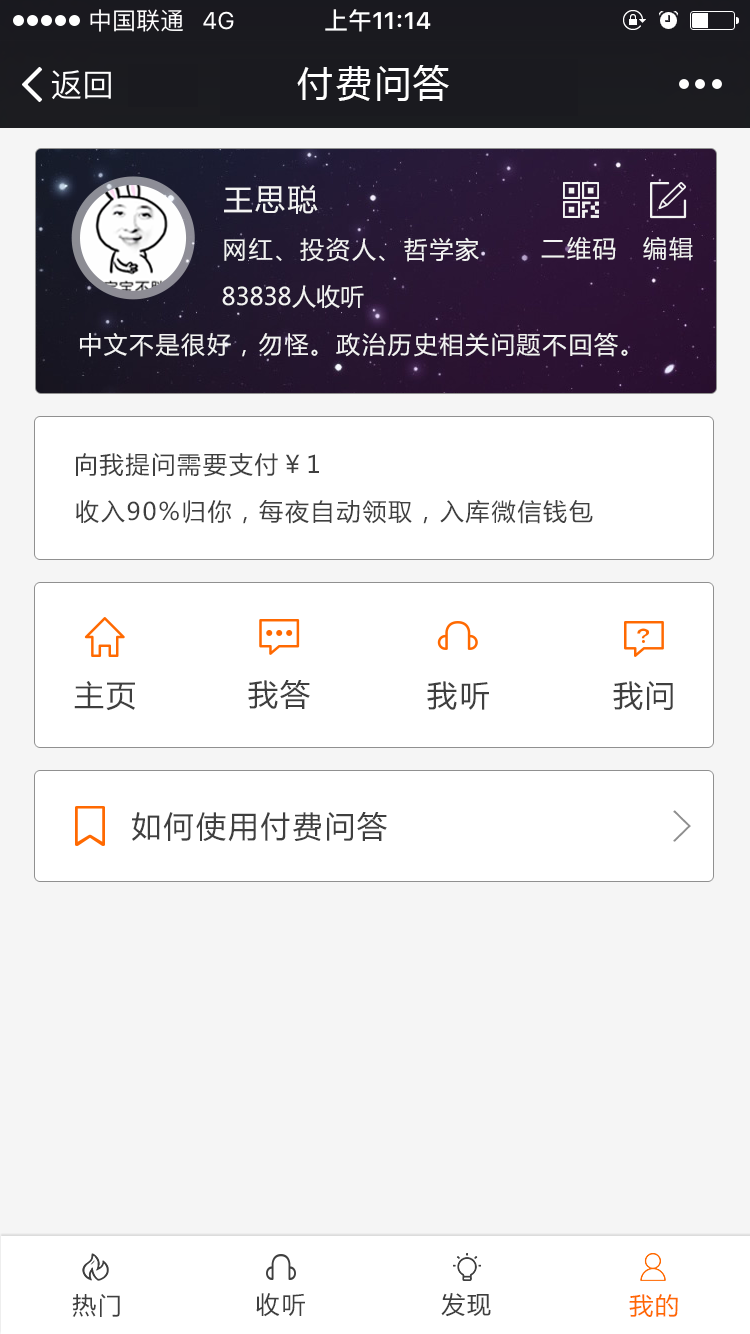
<style>
.page{position:relative;width:750px;height:1334px;background:#f5f5f5}
.page>*{position:absolute;margin:0}
.t1{font:36px "MicrosoftYaHei";letter-spacing:0.075em;color:#ffffff}
.t2{font:30px "MicrosoftYaHei";letter-spacing:0.075em;color:#f3f3f3}
.t3{font:24px "MicrosoftYaHei";letter-spacing:0.075em;color:#f3f3f3}
.t4{font:24.1px "MicrosoftYaHei";letter-spacing:0.075em;color:#f3f3f3}
.t5{font:24px "MicrosoftYaHei";color:#f3f3f3}
.t6{font:24px "MicrosoftYaHei";letter-spacing:0.075em;color:#3f3f3f}
.t7{font:30px "MicrosoftYaHei";letter-spacing:0.075em;color:#3f3f3f}
.t8{font:29.9px "MicrosoftYaHei";letter-spacing:0.075em;color:#3f3f3f}
.t9{font:24px "MicrosoftYaHei";letter-spacing:0.075em;color:#ff6901}
</style>
<div class="page">
<p class="t1" style="left:297px;top:65px;width:152px;height:36px">付费问答</p>
<p class="t2" style="left:224px;top:185px;width:94px;height:29px">王思聪</p>
<p class="t3" style="left:224px;top:237px;width:255px;height:25px">网红、投资人、哲学家</p>
<p class="t4" style="left:541px;top:237px;width:75px;height:23px">二维码</p>
<p class="t4" style="left:643px;top:237px;width:50px;height:24px">编辑</p>
<p class="t5" style="left:222px;top:285px;width:142px;height:24px">83838人收听</p>
<p class="t3" style="left:80px;top:333px;width:548px;height:24px">中文不是很好，勿怪。政治历史相关问题不回答。</p>
<p class="t6" style="left:76px;top:453px;width:243px;height:24px">向我提问需要支付￥1</p>
<p class="t6" style="left:76px;top:499px;width:517px;height:25px">收入90%归你，每夜自动领取，入库微信钱包</p>
<p class="t7" style="left:74px;top:681px;width:61px;height:30px">主页</p>
<p class="t8" style="left:248px;top:680px;width:62px;height:29px">我答</p>
<p class="t8" style="left:427px;top:681px;width:62px;height:29px">我听</p>
<p class="t8" style="left:613px;top:681px;width:60px;height:29px">我问</p>
<p class="t7" style="left:132px;top:812px;width:255px;height:30px">如何使用付费问答</p>
<p class="t6" style="left:72px;top:1294px;width:48px;height:23px">热门</p>
<p class="t6" style="left:256px;top:1293px;width:49px;height:24px">收听</p>
<p class="t6" style="left:441px;top:1293px;width:50px;height:24px">发现</p>
<p class="t9" style="left:629px;top:1294px;width:49px;height:23px">我的</p>
</div>
